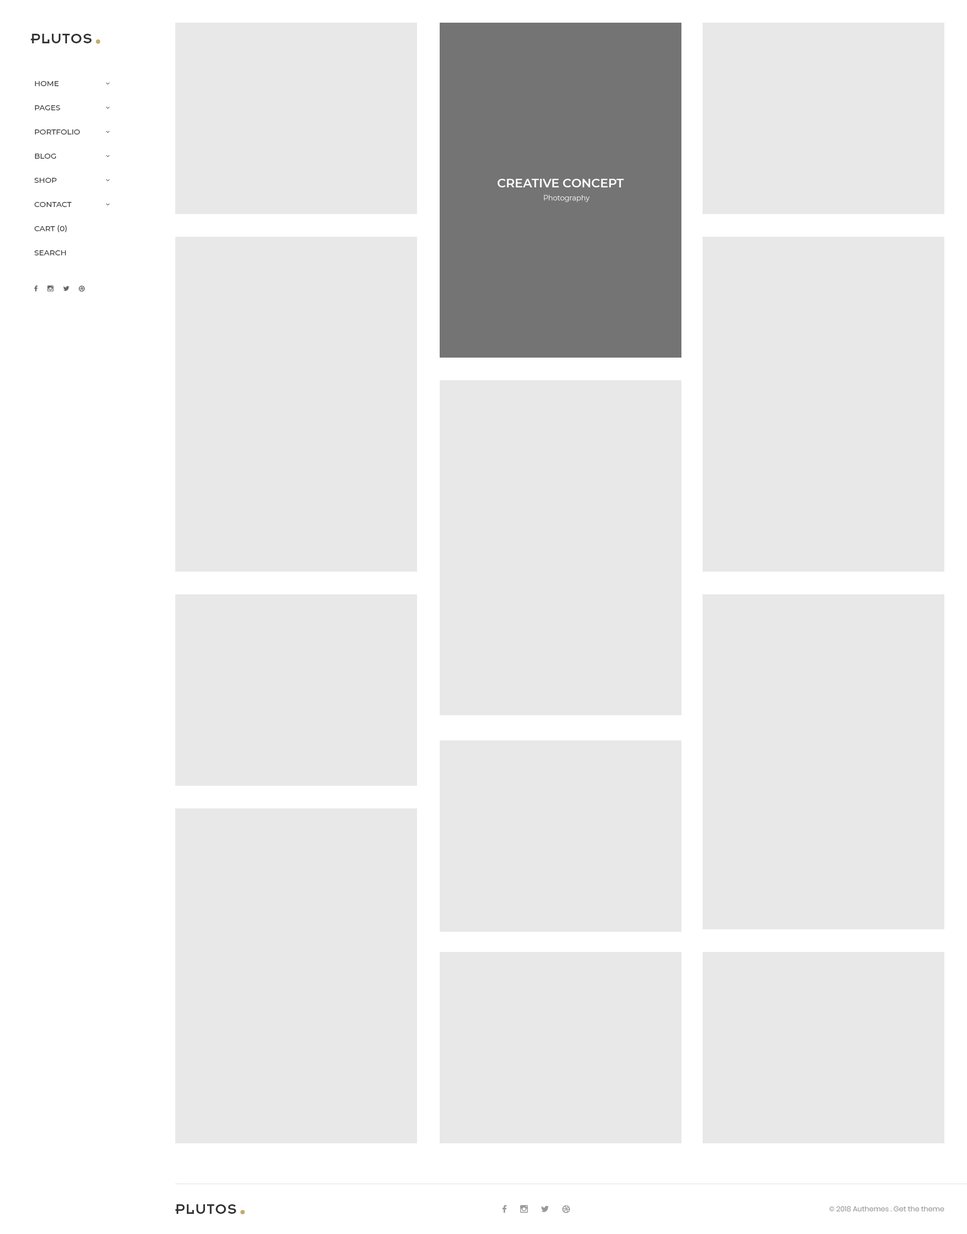
<style>
.page{position:relative;width:967px;height:1234px;background:#e8e8e8}
.page>*{position:absolute;margin:0}
.t1{font:15.1px "Insignia";letter-spacing:0.05em;color:#333333;text-transform:uppercase}
.t2{font:36.3px "Insignia";letter-spacing:0.05em;color:#c3ac6d;text-transform:uppercase}
.t3{font:7.6px/24.2px "Montserrat-Medium";color:#333333;text-transform:uppercase}
.t4{font:12.1px "Montserrat-SemiBold";color:#ffffff;text-transform:uppercase}
.t5{font:7px "Montserrat-Regular";color:#e8e8e8}
.t6{font:7px "Poppins-Regular";color:#999999}
</style>
<div class="page">
<p class="t1" style="left:31px;top:34px;width:61px;height:9px">Plutos</p>
<p class="t2" style="left:96px;top:39px;width:4px;height:5px">.</p>
<p class="t3" style="left:34px;top:81px;width:46px;height:174px">Home<br>Pages<br>portfolio<br>blog<br>Shop<br>contact<br>cart (0)<br>search</p>
<p class="t4" style="left:497px;top:179px;width:127px;height:8px">Creative concept</p>
<p class="t5" style="left:544px;top:195px;width:46px;height:7px">Photography</p>
<p class="t1" style="left:175px;top:1204px;width:61px;height:9px">Plutos</p>
<p class="t6" style="left:829px;top:1205px;width:115px;height:6px">© 2018 Authemes . Get the theme</p>
<p class="t2" style="left:240px;top:1209px;width:5px;height:5px">.</p>
</div>
